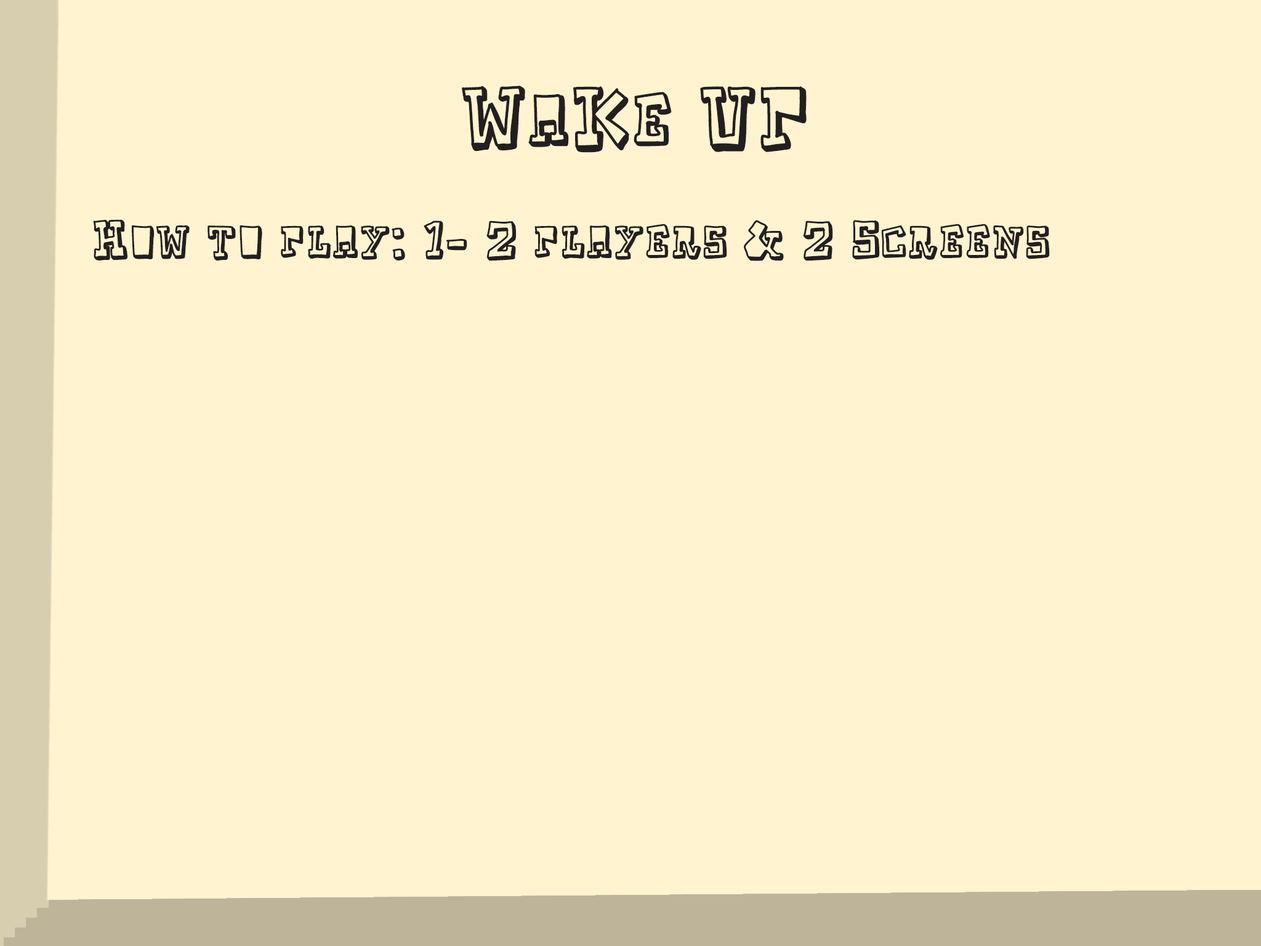
<style>
.page{position:relative;width:1261px;height:946px;background:#fff3d0}
.page>*{position:absolute;margin:0}
.t1{font:82.1px "TakeTwo";color:#231f20}
.t2{font:51.3px "TakeTwo";color:#231f20}
</style>
<div class="page">
<p class="t1" style="left:462px;top:86px;width:345px;height:67px">WaKe UP</p>
<p class="t2" style="left:93px;top:219px;width:957px;height:42px">How to play: 1- 2 players &amp; 2 Screens</p>
</div>
